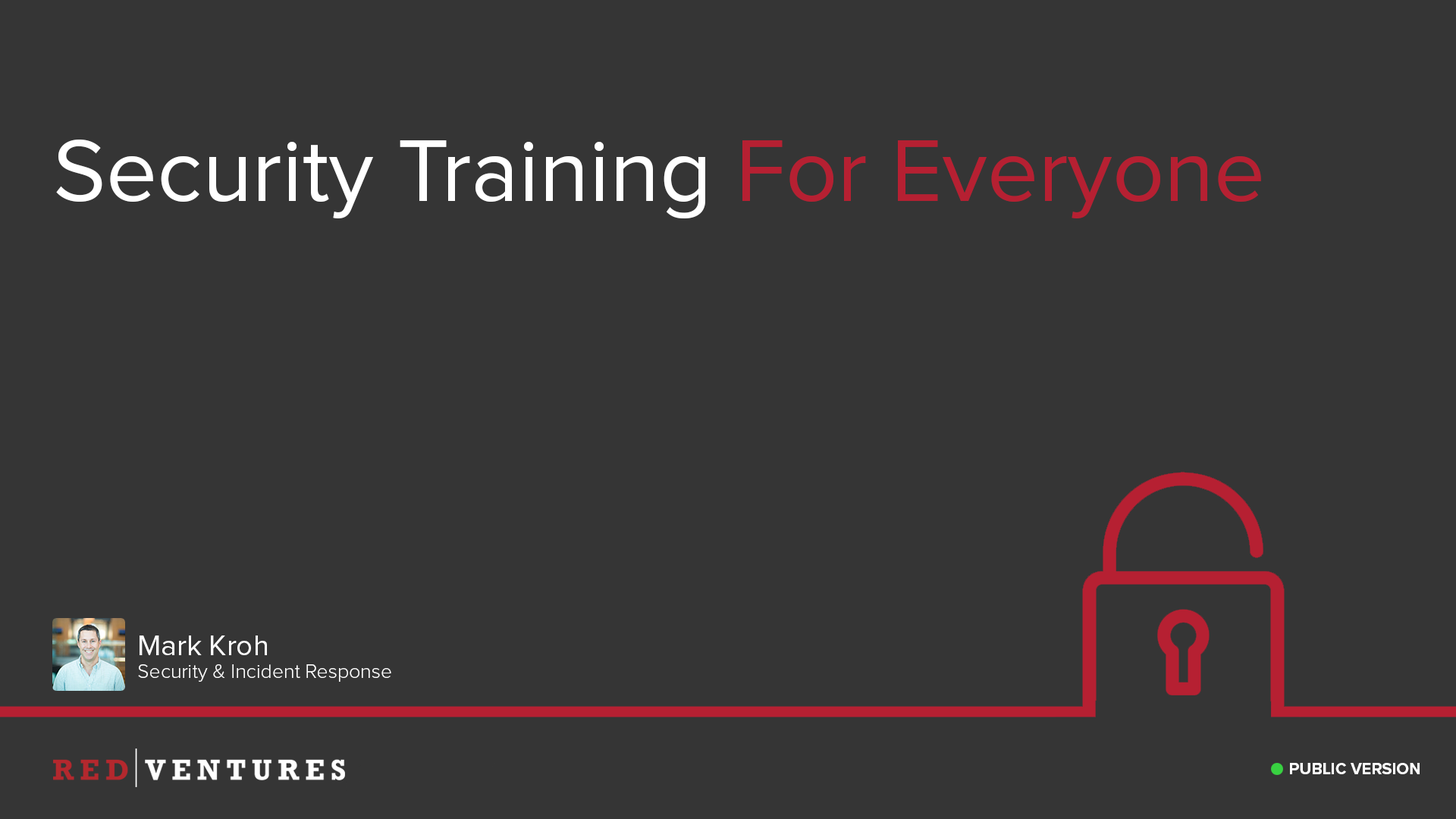
<style>
.page{position:relative;width:1456px;height:819px;background:#353535}
.page>*{position:absolute;margin:0}
.t1{font:90.7px "ProximaNova-Regular";color:#ffffff}
.t2{font:90.7px "ProximaNova-Regular";color:#b62032}
.t3{font:29.3px "ProximaNova-Regular";color:#ffffff}
.t4{font:20.2px "ProximaNova-Light";color:#ffffff}
.t5{font:16.4px "ProximaNova-Bold";color:#ffffff}
</style>
<div class="page">
<p class="t1" style="left:56px;top:140px;width:1205px;height:79px">Security Training <span class="t2">For Everyone</span></p>
<p class="t3" style="left:140px;top:635px;width:127px;height:20px">Mark Kroh</p>
<p class="t4" style="left:138px;top:664px;width:253px;height:18px">Security &amp; Incident Response</p>
<p class="t5" style="left:1290px;top:763px;width:130px;height:11px">PUBLIC VERSION</p>
</div>
